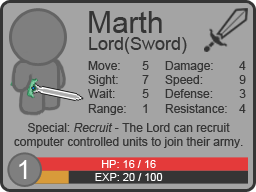
<style>
.page{position:relative;width:256px;height:192px;background:#a4a4a4}
.page>*{position:absolute;margin:0}
.t1{font:30px "ArialMT";color:#353535}
.t2{font:18px "ArialMT";color:#353535}
.t3{font:12px "ArialMT";color:#353535}
.t4{font:12px "Arial-ItalicMT";color:#353535}
.t5{font:26.2px "ArialMT";color:#ffffff}
.t6{font:11px "ArialMT";color:#ffffff}
</style>
<div class="page">
<p class="t1" style="left:89px;top:11px;width:73px;height:22px">Marth</p>
<p class="t2" style="left:89px;top:37px;width:98px;height:17px">Lord(Sword)</p>
<p class="t3" style="left:88px;top:61px;width:38px;height:54px">Move:<br>Sight:<br>Wait:<br>Range:</p>
<p class="t3" style="left:142px;top:61px;width:7px;height:52px;text-align:right">5<br>7<br>5<br>1</p>
<p class="t3" style="left:165px;top:61px;width:62px;height:52px">Damage:<br>Speed:<br>Defense:<br>Resistance:</p>
<p class="t3" style="left:239px;top:61px;width:7px;height:52px;text-align:right">4<br>9<br>3<br>4</p>
<p class="t3" style="left:14px;top:123px;width:229px;height:25px;text-align:center">Special: <span class="t4">Recruit</span> - The Lord can recruit computer controlled units to join their army.</p>
<p class="t5" style="left:19px;top:160px;width:8px;height:19px">1</p>
<p class="t6" style="left:102px;top:160px;width:54px;height:8px">HP: 16 / 16</p>
<p class="t6" style="left:95px;top:173px;width:68px;height:8px">EXP: 20 / 100</p>
</div>
